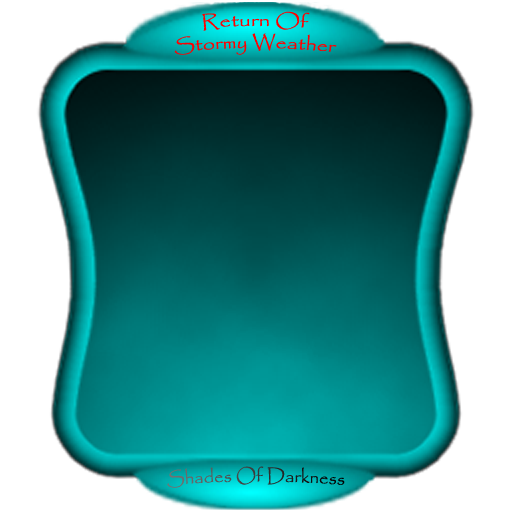
<style>
.page{position:relative;width:512px;height:512px;background:#ffffff}
.page>*{position:absolute;margin:0}
.t1{font:18.3px "Papyrus-Regular";color:#ff0000;scale:1.16 1}
.t2{font:18.3px "Papyrus-Regular"}
</style>
<div class="page">
<p class="t1" style="left:174px;top:11px;width:163px;height:44px;text-align:center">Return Of<br>Stormy Weather</p>
<p class="t2" style="left:167px;top:466px;width:178px;height:22px">Shades Of Darkness</p>
</div>
